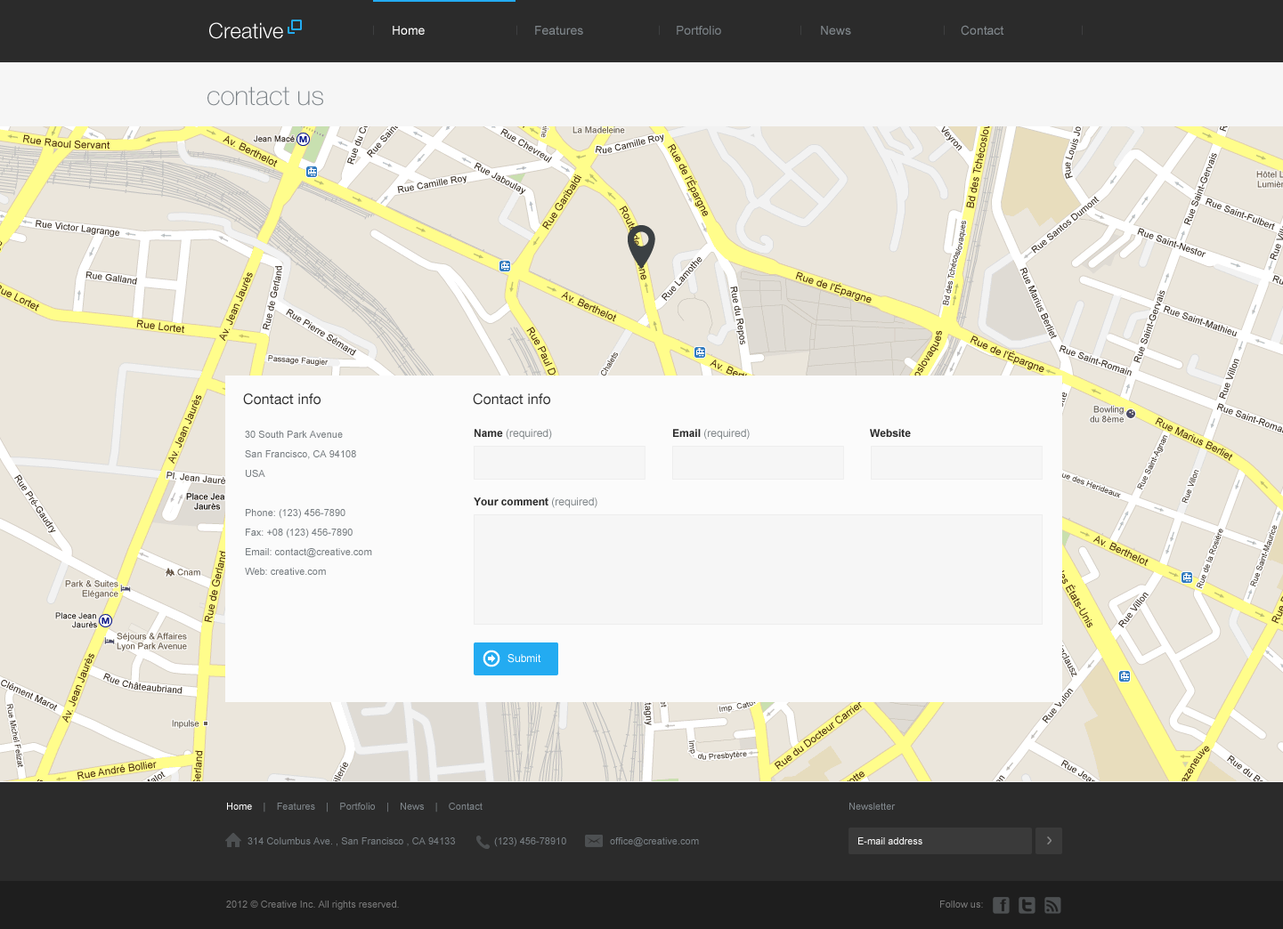
<style>
.page{position:relative;width:1283px;height:929px;background:#ebe6dc}
.page>*{position:absolute;margin:0}
.t1{font:21.4px "HelveticaNeueLTStd-Lt";color:#ffffff}
.t2{font:9.2px "HelveticaNeueLTStd-Lt";scale:1.35 1}
.t3{font:12.5px "ArialMT";color:#ffffff}
.t4{font:12.5px "ArialMT";color:#80878c}
.t5{font:12.5px "ArialMT";color:#7a8186}
.t6{font:26.7px "HelveticaNeueLTStd-Th";color:#7a8186}
.t7{font:14.2px "HelveticaNeueLTStd-Roman";color:#2b2b2b}
.t8{font:9.8px/19.6px "ArialMT";color:#757b7f}
.t9{font:10.7px "ArialMT";color:#7e8487}
.t10{font:10.7px "Arial-BoldMT";color:#2b2b2b}
.t11{font:10.7px "ArialMT";color:#ffffff}
.t12{font:9.8px "ArialMT";color:#80878c}
.t13{font:9.8px "ArialMT";color:#ffffff}
.t14{font:9.8px "ArialMT";color:#7a8186}
.t15{font:9.8px "ArialMT";color:#797979}
</style>
<div class="page">
<p class="t1" style="left:209px;top:22px;width:74px;height:17px">Creative</p>
<p class="t2" style="left:373px;top:25px;width:1px;height:11px">|</p>
<p class="t3" style="left:393px;top:26px;width:32px;height:9px">Home</p>
<p class="t2" style="left:516px;top:25px;width:1px;height:11px">|</p>
<p class="t4" style="left:535px;top:26px;width:48px;height:9px">Features</p>
<p class="t2" style="left:659px;top:25px;width:1px;height:11px">|</p>
<p class="t5" style="left:677px;top:26px;width:44px;height:9px">Portfolio</p>
<p class="t2" style="left:800px;top:25px;width:1px;height:11px">|</p>
<p class="t4" style="left:821px;top:26px;width:30px;height:9px">News</p>
<p class="t2" style="left:944px;top:25px;width:1px;height:11px">|</p>
<p class="t4" style="left:961px;top:25px;width:43px;height:11px">Contact</p>
<p class="t2" style="left:1082px;top:25px;width:1px;height:11px">|</p>
<p class="t6" style="left:207px;top:86px;width:116px;height:20px">contact us</p>
<p class="t7" style="left:243px;top:394px;width:78px;height:11px">Contact info</p>
<p class="t7" style="left:473px;top:394px;width:77px;height:11px">Contact info</p>
<p class="t8" style="left:245px;top:431px;width:127px;height:144px">30 South Park Avenue<br>San Francisco, CA 94108<br>USA<br><br>Phone: (123) 456-7890<br>Fax: +08 (123) 456-7890<br>Email: contact@creative.com<br>Web: creative.com</p>
<p class="t9" style="left:475px;top:429px;width:77px;height:11px"><span class="t10">Name</span> (required)</p>
<p class="t9" style="left:673px;top:429px;width:77px;height:11px"><span class="t10">Email</span> (required)</p>
<p class="t10" style="left:870px;top:429px;width:41px;height:8px">Website</p>
<p class="t10" style="left:474px;top:498px;width:123px;height:10px">Your comment<span class="t9"> (required)</span></p>
<p class="t11" style="left:507px;top:654px;width:34px;height:9px">Submit</p>
<p class="t12" style="left:227px;top:803px;width:256px;height:10px"><span class="t13">Home   </span> |    Features    |    Portfolio    |    News    |    Contact</p>
<p class="t12" style="left:849px;top:803px;width:47px;height:7px">Newsletter</p>
<p class="t14" style="left:248px;top:838px;width:207px;height:9px">314 Columbus Ave. , San Francisco , CA 94133</p>
<p class="t14" style="left:494px;top:838px;width:72px;height:10px">(123) 456-78910</p>
<p class="t14" style="left:610px;top:838px;width:89px;height:10px">office@creative.com</p>
<p class="t13" style="left:858px;top:838px;width:64px;height:7px">E-mail address</p>
<p class="t15" style="left:226px;top:901px;width:173px;height:10px">2012 © Creative Inc. All rights reserved.</p>
<p class="t15" style="left:940px;top:901px;width:43px;height:7px">Follow us:</p>
</div>
